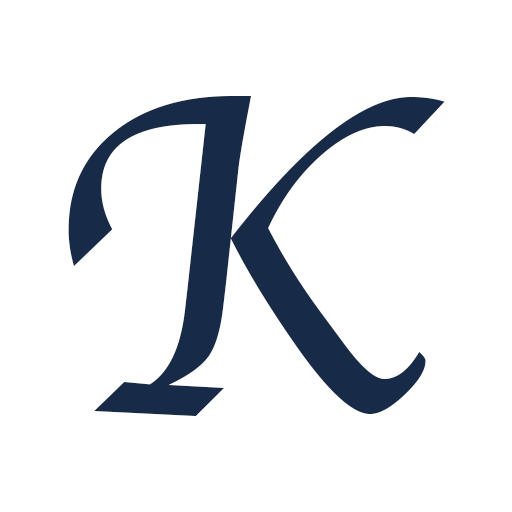
<style>
.page{position:relative;width:512px;height:512px;background:#ffffff}
.page>*{position:absolute;margin:0}
.t1{font:480px "Apple-Chancery";color:#172a47}
</style>
<div class="page">
<p class="t1" style="left:68px;top:96px;width:377px;height:320px">K</p>
</div>
